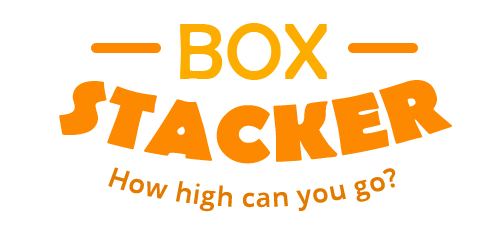
<style>
.page{position:relative;width:500px;height:230px;background:#ffffff}
.page>*{position:absolute;margin:0}
.t1{font:80px "BerlinSansFB-Reg";color:#fdad00;text-transform:uppercase}
.t2{font:80px "BerlinSansFB-Bold";color:#fd8900;text-transform:uppercase}
.t3{font:26px/40px "OpenSans-Semibold";color:#e27a00;font-weight:bold}
</style>
<div class="page">
<p class="t1" style="left:180px;top:23px;width:147px;height:57px">Box</p>
<p class="t2" style="left:59px;top:80px;width:393px;height:84px">Stacker</p>
<p class="t3" style="left:108px;top:167px;width:288px;height:45px;text-align:center">How high can you go?</p>
</div>
